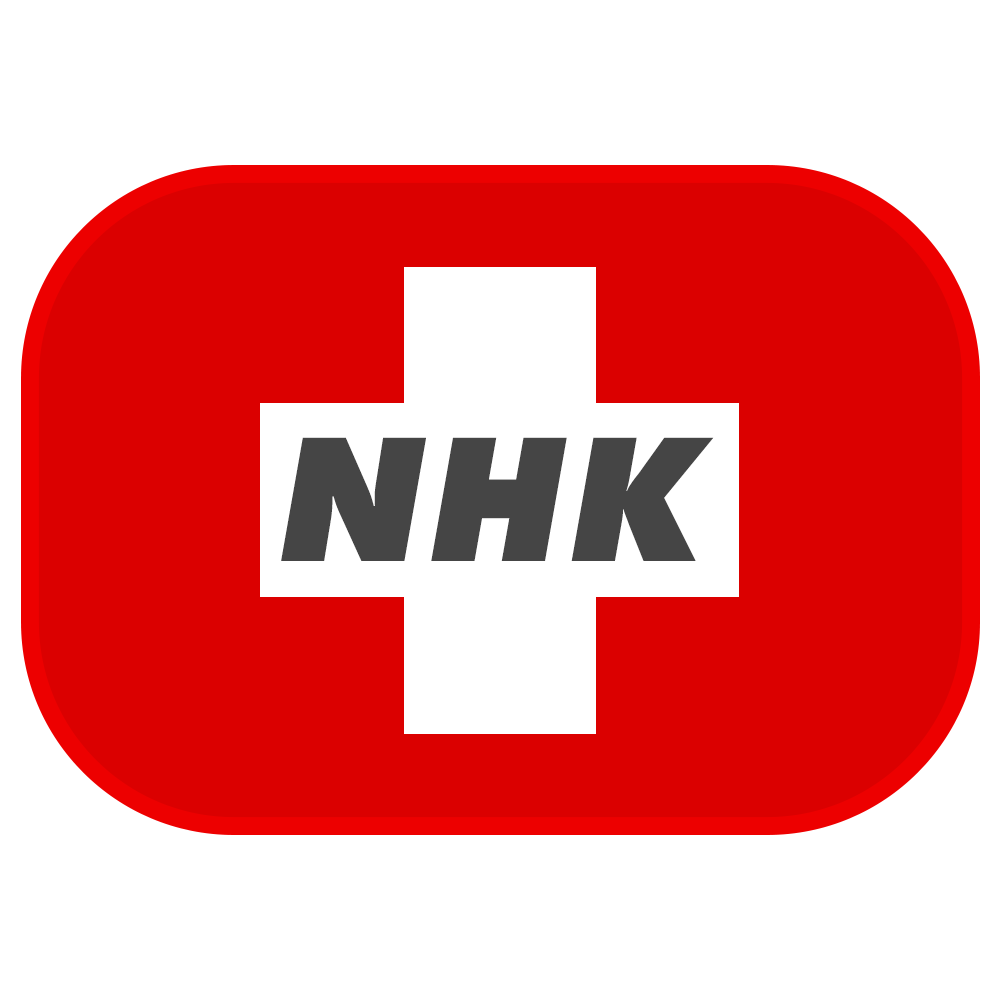
<style>
.page{position:relative;width:1000px;height:1000px;background:#ffffff}
.page>*{position:absolute;margin:0}
.t1{font:922.5px "Futura-ExtBol";color:#ffffff}
.t2{font:184.5px "Futura-ExtBol";color:#454545;font-style:italic}
</style>
<div class="page">
<p class="t1" style="left:268px;top:276px;width:462px;height:449px">+</p>
<p class="t2" style="left:281px;top:437px;width:433px;height:124px">NHK</p>
</div>
